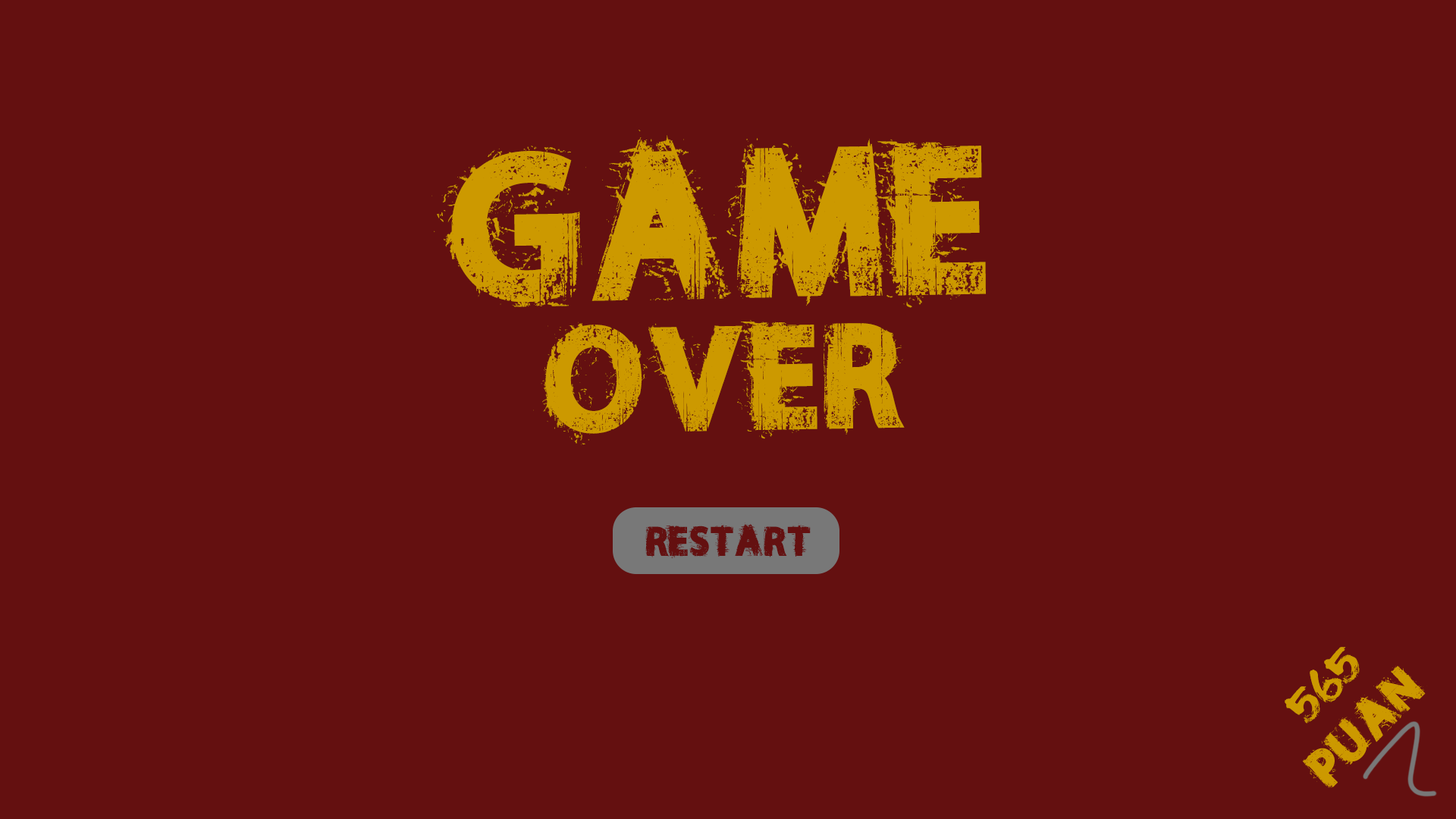
<style>
.page{position:relative;width:1456px;height:819px;background:#641010}
.page>*{position:absolute;margin:0}
.t1{font:193px "NORIKEEDEMO";color:#cc9900;text-transform:uppercase}
.t2{font:135.9px/132px "NORIKEEDEMO";color:#cc9900;text-transform:uppercase}
.t3{font:50px "DKFlagellumDei-Regular";color:#cc9900;text-transform:uppercase}
</style>
<div class="page">
<p class="t1" style="left:431px;top:130px;width:555px;height:315px;text-align:center;rotate:-1deg">Game<br><span class="t2">over</span></p>
<p class="t3" style="left:1285px;top:647px;width:75px;height:76px;rotate:-45deg">565</p>
</div>
